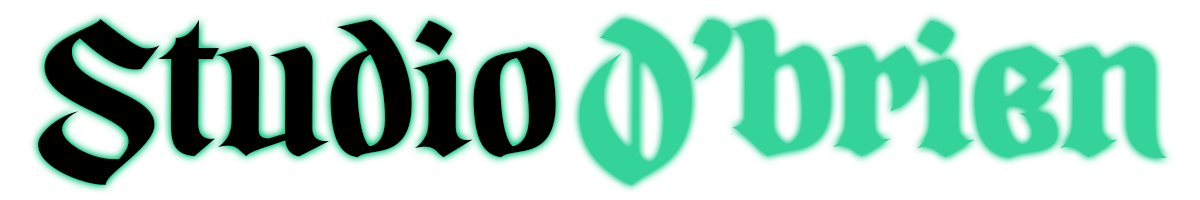
<style>
.page{position:relative;width:1200px;height:200px;background:#ffffff}
.page>*{position:absolute;margin:0}
.t1{font:204.2px "ZakenManusPERSONALUSE-Regular";letter-spacing:-0.02em;color:#000000;scale:1.03 1}
.t2{font:204.2px "ZakenManusPERSONALUSE-Regular";letter-spacing:-0.02em;color:#34d399;scale:1.03 1}
.t3{font:204.2px "ZakenManusPERSONALUSE-Regular";letter-spacing:-0.06em;color:#34d399;scale:1.03 1}
</style>
<div class="page">
<p class="t1" style="left:38px;top:18px;width:518px;height:167px">Studio</p>
<p class="t2" style="left:580px;top:18px;width:587px;height:168px"><span class="t3">O</span>’brien</p>
</div>
